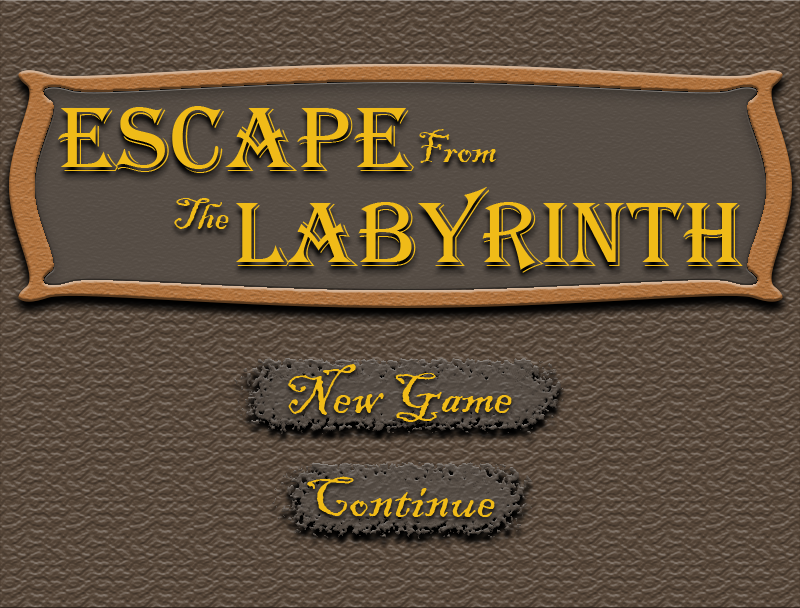
<style>
.page{position:relative;width:800px;height:608px}
.page>*{position:absolute;margin:0}
.t1{font:95.2px "Algerian";color:#f0bb18}
.t2{font:46.2px "BlackadderITC-Regular";color:#f0bb18}
.t3{font:45.7px "BlackadderITC-Regular";color:#f0bb18}
.t4{font:60px "BlackadderITC-Regular";color:#f0bb18}
</style>
<div class="page">
<p class="t1" style="left:58px;top:106px;width:356px;height:67px">Escape</p>
<p class="t2" style="left:419px;top:129px;width:77px;height:34px">From</p>
<p class="t3" style="left:174px;top:198px;width:55px;height:31px">The</p>
<p class="t1" style="left:236px;top:186px;width:507px;height:87px">Labyrinth</p>
<p class="t4" style="left:288px;top:364px;width:224px;height:58px">New Game</p>
<p class="t4" style="left:288px;top:364px;width:224px;height:58px">New Game</p>
<p class="t4" style="left:307px;top:476px;width:188px;height:41px">Continue</p>
<p class="t4" style="left:307px;top:476px;width:188px;height:41px">Continue</p>
</div>
